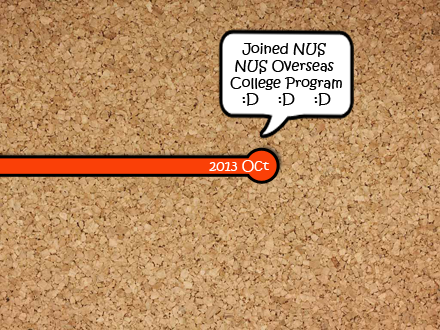
<style>
.page{position:relative;width:440px;height:330px}
.page>*{position:absolute;margin:0}
.t1{font:14px "KristenITC-Regular";color:#000000}
.t2{font:14px "KristenITC-Regular";color:#ffffff}
</style>
<div class="page">
<p class="t1" style="left:230px;top:43px;width:112px;height:63px;text-align:center">Joined NUS <br>NUS Overseas <br>College Program<br>:D :D :D</p>
<p class="t2" style="left:209px;top:160px;width:61px;height:12px">2013 Oct</p>
</div>
